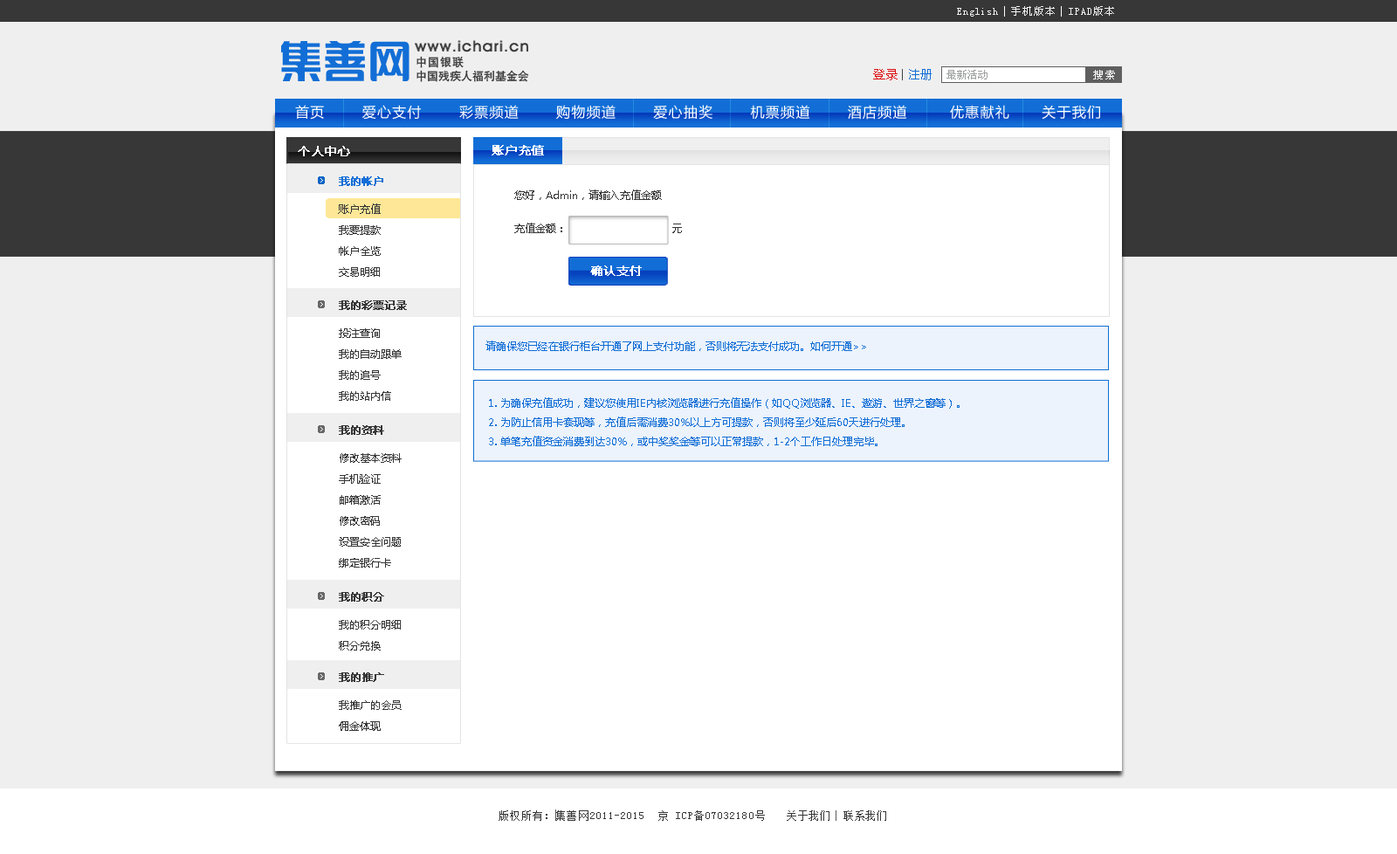
<style>
.page{position:relative;width:1397px;height:854px;background:#ffffff}
.page>*{position:absolute;margin:0}
.t1{font:10.5px "SimSun";letter-spacing:0.09em;color:#f0efef}
.t2{font:10.5px "SimSun";letter-spacing:0.07em;color:#f0efef}
.t3{font:11.3px "HeitiCSEG-Medium-GB";letter-spacing:0.08em;color:#373738}
.t4{font:11.3px "HeitiCSEG-Medium-GB";color:#373738}
.t5{font:12.2px "FZLTXHK--GBK1-0";letter-spacing:0.01em;color:#dd0a0d}
.t6{font:11.3px "FZLTXHK--GBK1-0";letter-spacing:0.01em;color:#434344}
.t7{font:12.2px "FZLTXHK--GBK1-0";letter-spacing:0.01em;color:#126ed6}
.t8{font:10.5px "SimSun";color:#9fa0a0}
.t9{font:10.5px "SimSun";letter-spacing:0.16em;color:#ffffff}
.t10{font:14px "MicrosoftYaHei";letter-spacing:0.08em;color:#ffffff}
.t11{font:12.2px "MicrosoftYaHei";color:#ffffff;font-weight:bold}
.t12{font:12.2px "MicrosoftYaHei";letter-spacing:0.01em;color:#ffffff;font-weight:bold}
.t13{font:10.5px "MicrosoftYaHei";color:#126ed6;font-weight:bold}
.t14{font:10.5px/33.2px "MicrosoftYaHei";color:#373738}
.t15{font:10.5px/21px "MicrosoftYaHei";color:#373738}
.t16{font:10.5px "MicrosoftYaHei";color:#373738;font-weight:bold}
.t17{font:10.5px "MicrosoftYaHei";color:#126ed6}
.t18{font:10.5px/19.2px "MicrosoftYaHei";color:#126ed6}
.t19{font:10.5px "SimSun";letter-spacing:0.09em;color:#373738}
.t20{font:10.5px "SimSun";letter-spacing:0.07em;color:#373738}
</style>
<div class="page">
<p class="t1" style="left:957px;top:6px;width:157px;height:11px"><span class="t2">English  </span>手机版本  IPAD版本</p>
<p class="t3" style="left:416px;top:56px;width:48px;height:12px">中国银联</p>
<p class="t4" style="left:416px;top:70px;width:113px;height:12px">中国残疾人福利基金会</p>
<p class="t5" style="left:873px;top:69px;width:58px;height:11px">登录 <span class="t6">| </span><span class="t7">注册</span></p>
<p class="t8" style="left:946px;top:70px;width:41px;height:9px">最新活动</p>
<p class="t9" style="left:1093px;top:70px;width:22px;height:9px">搜索</p>
<p class="t10" style="left:295px;top:105px;width:805px;height:15px">首页       爱心支付       彩票频道       购物频道       爱心抽奖       机票频道       酒店频道        优惠献礼      关于我们</p>
<p class="t11" style="left:298px;top:146px;width:52px;height:10px">个人中心</p>
<p class="t12" style="left:491px;top:145px;width:53px;height:10px">账户充值</p>
<p class="t13" style="left:339px;top:176px;width:44px;height:10px">我的帐户</p>
<p class="t14" style="left:514px;top:189px;width:168px;height:44px">您好，Admin，请输入充值金额<br>充值金额：                              元</p>
<p class="t15" style="left:338px;top:203px;width:43px;height:74px">账户充值<br>我要提款 <br>帐户全览 <br>交易明细</p>
<p class="t11" style="left:590px;top:265px;width:52px;height:11px">确认支付</p>
<p class="t16" style="left:339px;top:300px;width:68px;height:10px">我的彩票记录</p>
<p class="t15" style="left:339px;top:328px;width:63px;height:73px">投注查询<br>我的自动跟单<br>我的追号<br>我的站内信</p>
<p class="t17" style="left:485px;top:340px;width:381px;height:11px">请确保您已经在银行柜台开通了网上支付功能，否则将无法支付成功。如何开通&gt;&gt;</p>
<p class="t18" style="left:489px;top:397px;width:470px;height:49px">1. 为确保充值成功，建议您使用IE内核浏览器进行充值操作（如QQ浏览器、IE、遨游、世界之窗等）。<br>2. 为防止信用卡套现等，充值后需消费30%以上方可提款，否则将至少延后60天进行处理。<br>3. 单笔充值资金消费到达30%，或中奖奖金等可以正常提款，1-2个工作日处理完毕。</p>
<p class="t16" style="left:339px;top:425px;width:45px;height:10px">我的资料</p>
<p class="t15" style="left:339px;top:453px;width:63px;height:114px">修改基本资料<br>手机验证<br>邮箱激活<br>修改密码<br>设置安全问题<br>绑定银行卡</p>
<p class="t16" style="left:339px;top:592px;width:45px;height:9px">我的积分</p>
<p class="t15" style="left:339px;top:620px;width:62px;height:30px">我的积分明细<br>积分兑换</p>
<p class="t16" style="left:339px;top:672px;width:45px;height:10px">我的推广</p>
<p class="t15" style="left:339px;top:700px;width:63px;height:31px">我推广的会员<br>佣金体现</p>
<p class="t19" style="left:498px;top:810px;width:267px;height:11px">版权所有：集善网2011-2015  京 ICP备07032180号</p>
<p class="t20" style="left:787px;top:810px;width:99px;height:11px">关于我们  联系我们</p>
</div>
